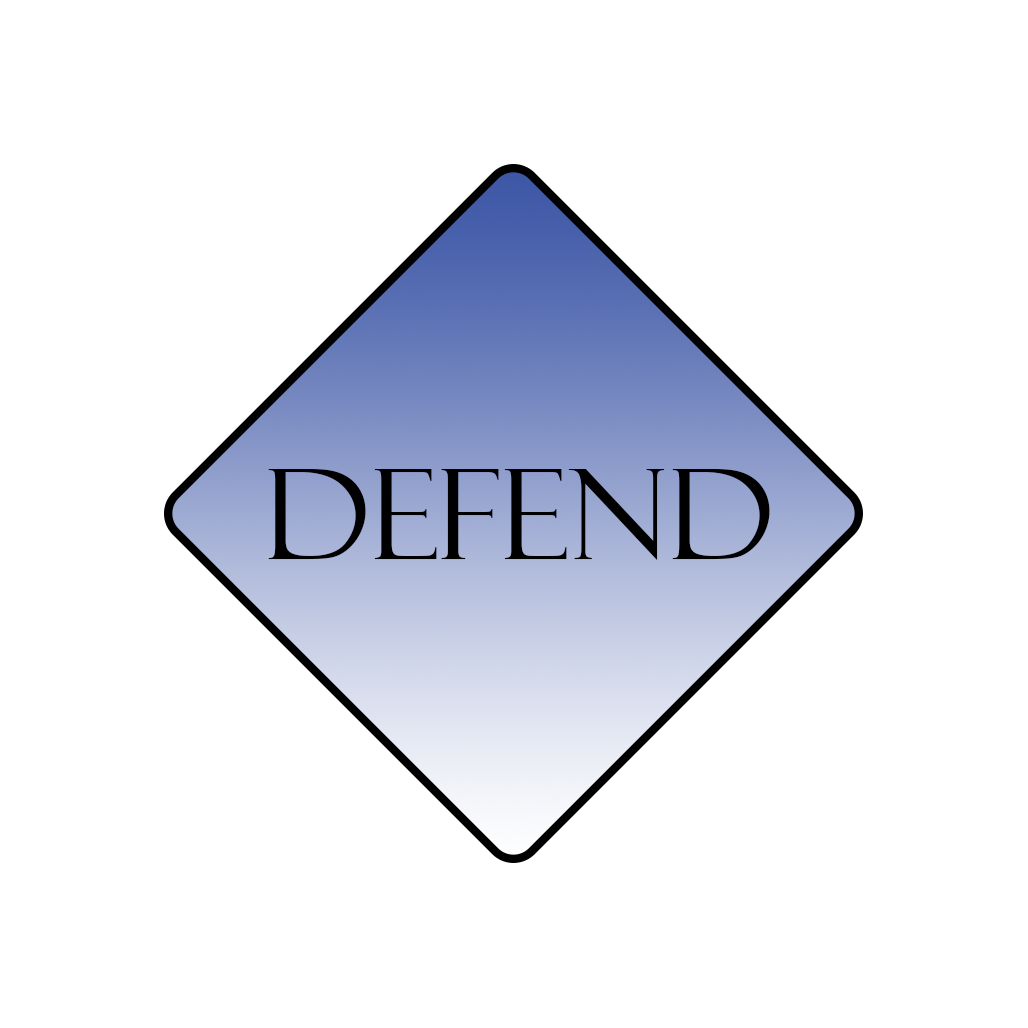
<style>
.page{position:relative;width:1028px;height:1028px;background:#ffffff}
.page>*{position:absolute;margin:0}
.t1{font:125px "FelixTitlingMT";color:#000000}
</style>
<div class="page">
<p class="t1" style="left:268px;top:469px;width:502px;height:91px">Defend</p>
</div>
